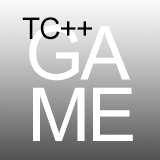
<style>
.page{position:relative;width:160px;height:160px}
.page>*{position:absolute;margin:0}
.t1{font:30px "ArialMT";letter-spacing:-0.04em;color:#000000}
.t2{font:74.3px "ArialMT";letter-spacing:-0.04em;color:#ffffff}
</style>
<div class="page">
<p class="t1" style="left:22px;top:17px;width:70px;height:23px">TC++</p>
<p class="t2" style="left:29px;top:25px;width:101px;height:56px">GA</p>
<p class="t2" style="left:33px;top:87px;width:100px;height:54px">ME</p>
</div>
